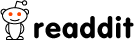
<style>
.page{position:relative;width:140px;height:40px;background:#ffffff}
.page>*{position:absolute;margin:0}
.t1{font:30px "VAGRound";color:#010101}
</style>
<div class="page">
<p class="t1" style="left:34px;top:16px;width:100px;height:23px">readdit</p>
</div>
